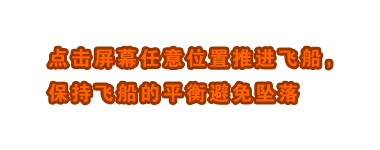
<style>
.page{position:relative;width:380px;height:150px;background:#ffffff}
.page>*{position:absolute;margin:0}
.t1{font:20px "Jdahei";letter-spacing:0.15em;color:#ff6400}
</style>
<div class="page">
<p class="t1" style="left:48px;top:48px;width:283px;height:55px">点击屏幕任意位置推进飞船，<br>保持飞船的平衡避免坠落</p>
</div>
